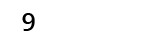
<style>
.page{position:relative;width:141px;height:44px;background:#ffffff}
.page>*{position:absolute;margin:0}
.t1{font:25px "OpenSans-Semibold";color:#000000}
</style>
<div class="page">
<p class="t1" style="left:22px;top:13px;width:13px;height:18px">9</p>
</div>
